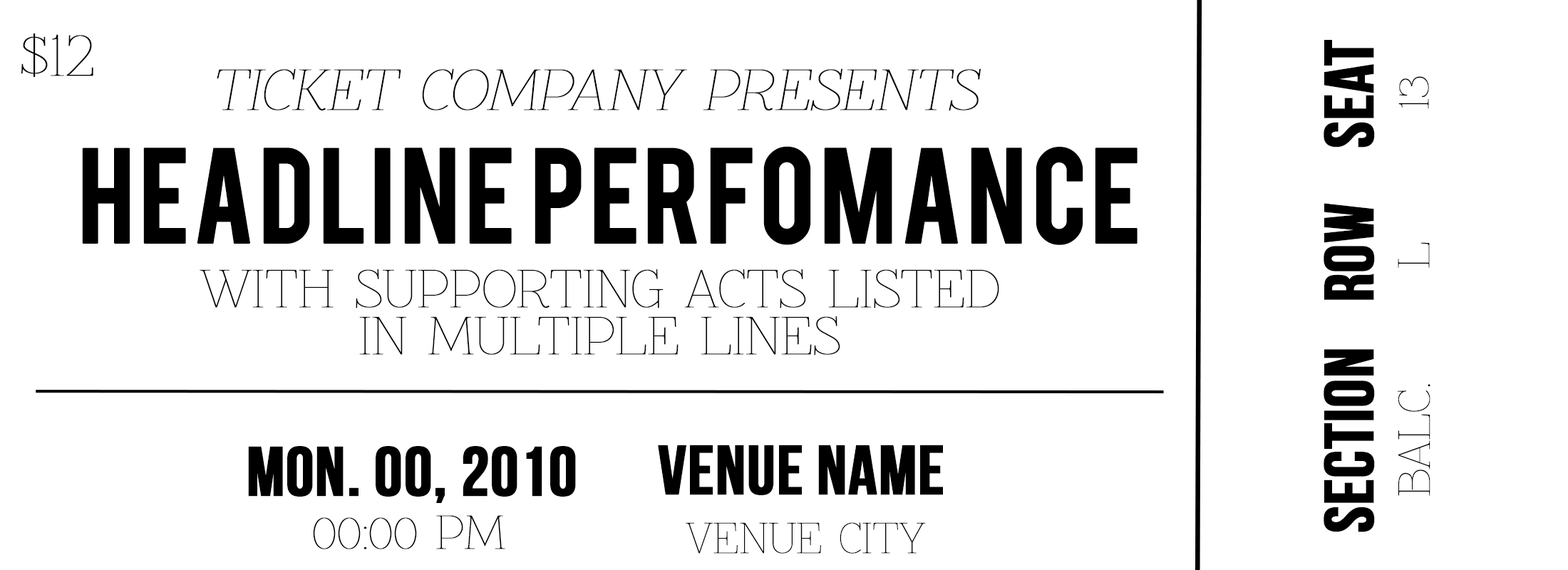
<style>
.page{position:relative;width:1568px;height:570px;background:#ffffff}
.page>*{position:absolute;margin:0}
.t1{font:56.9px "Znikomit";color:#000000;font-weight:bold}
.t2{font:69.6px "BebasNeue";color:#000000;font-weight:bold}
.t3{font:52.9px "Znikomit";color:#000000;font-weight:bold;font-style:italic}
.t4{font:40.9px "Znikomit";color:#000000;font-weight:bold}
.t5{font:106.1px "Bebas";color:#000000;font-weight:bold}
.t6{font:49px/47.5px "ZnikomitSC";color:#000000;font-weight:bold}
.t7{font:43.6px "Znikomit";color:#000000;font-weight:bold}
.t8{font:39.6px "Znikomit";color:#000000;font-weight:bold}
</style>
<div class="page">
<p class="t1" style="left:21px;top:33px;width:72px;height:44px">$12</p>
<p class="t2" style="left:1324px;top:40px;width:51px;height:492px;rotate:-90deg">Section  Row   Seat</p>
<p class="t3" style="left:217px;top:68px;width:764px;height:43px">TICKET COMPANY PRESENTS</p>
<p class="t4" style="left:1398px;top:76px;width:31px;height:33px;rotate:-90deg">13</p>
<p class="t5" style="left:82px;top:146px;width:1056px;height:99px">HEADLINE PERFOMANCE</p>
<p class="t4" style="left:1398px;top:242px;width:32px;height:26px;rotate:-90deg">L</p>
<p class="t6" style="left:200px;top:269px;width:799px;height:87px;text-align:center">WITH SUPPORTING ACTS LISTED<br>IN MULTIPLE LINES</p>
<p class="t4" style="left:1398px;top:384px;width:32px;height:112px;rotate:-90deg">BALC.</p>
<p class="t2" style="left:248px;top:446px;width:328px;height:57px">MON. 00, 2010</p>
<p class="t2" style="left:658px;top:445px;width:285px;height:50px">VENUE NAME</p>
<p class="t7" style="left:313px;top:515px;width:192px;height:35px">00:00 PM</p>
<p class="t8" style="left:686px;top:522px;width:240px;height:32px">VENUE CITY</p>
</div>
